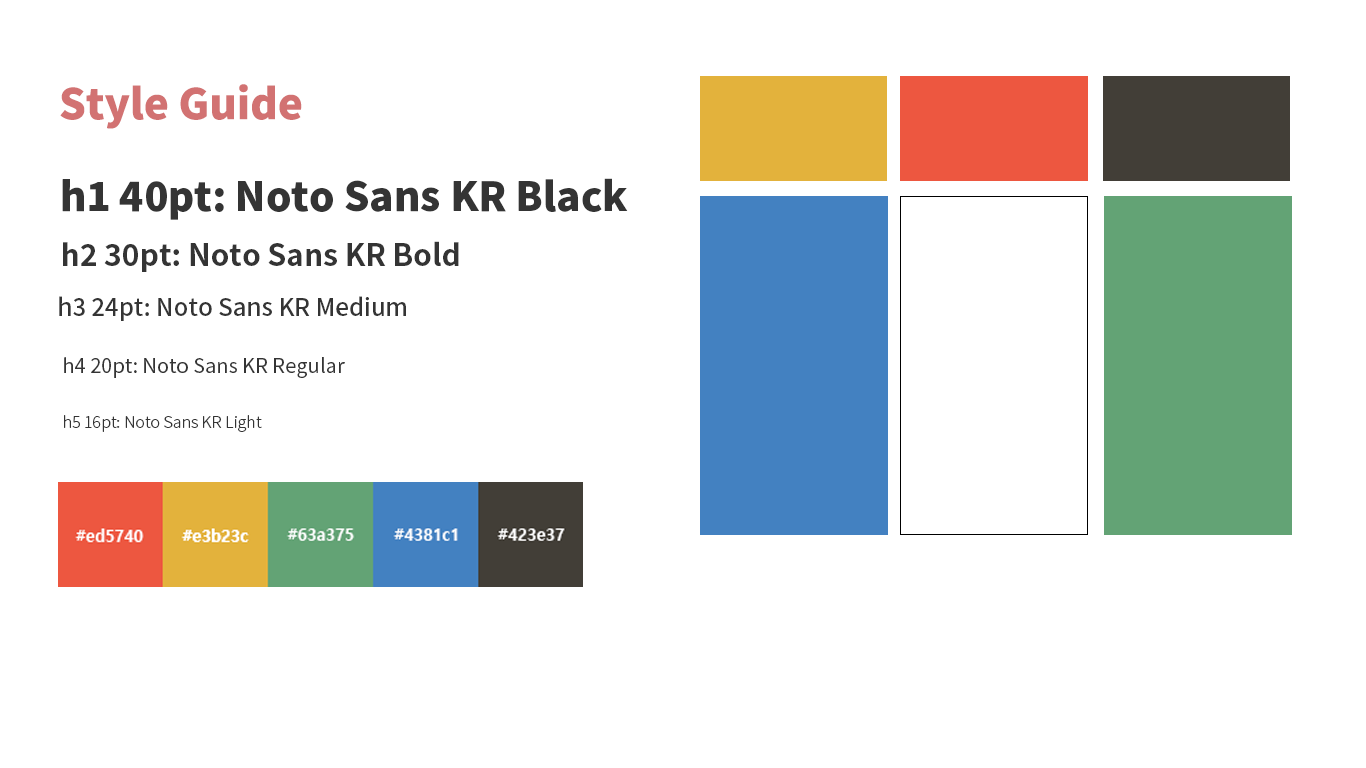
<style>
.page{position:relative;width:1366px;height:768px;background:#ffffff}
.page>*{position:absolute;margin:0}
.t1{font:42px "NotoSansKR-Black";color:#d27272}
.t2{font:40px "NotoSansKR-Black";color:#343434}
.t3{font:30px "NotoSansKR-Bold";color:#343434}
.t4{font:24px "NotoSansKR-Medium";color:#343434}
.t5{font:20px "NotoSansKR-Regular";color:#343434}
.t6{font:16px "NotoSansKR-Light";color:#343434}
</style>
<div class="page">
<p class="t1" style="left:60px;top:84px;width:242px;height:45px">Style Guide</p>
<p class="t2" style="left:62px;top:178px;width:566px;height:42px">h1 40pt: Noto Sans KR Black</p>
<p class="t3" style="left:63px;top:241px;width:396px;height:31px">h2 30pt: Noto Sans KR Bold</p>
<p class="t4" style="left:59px;top:296px;width:347px;height:25px">h3 24pt: Noto Sans KR Medium</p>
<p class="t5" style="left:64px;top:357px;width:281px;height:21px">h4 20pt: Noto Sans KR Regular</p>
<p class="t6" style="left:64px;top:415px;width:198px;height:17px">h5 16pt: Noto Sans KR Light</p>
</div>
